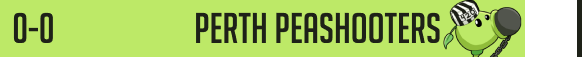
<style>
.page{position:relative;width:582px;height:57px;background:#bde967}
.page>*{position:absolute;margin:0}
.t1{font:42px "BigNoodleTitling";color:#1e2118}
</style>
<div class="page">
<p class="t1" style="left:13px;top:12px;width:40px;height:31px">0-0</p>
<p class="t1" style="left:196px;top:12px;width:244px;height:31px">Perth Peashooters</p>
</div>
